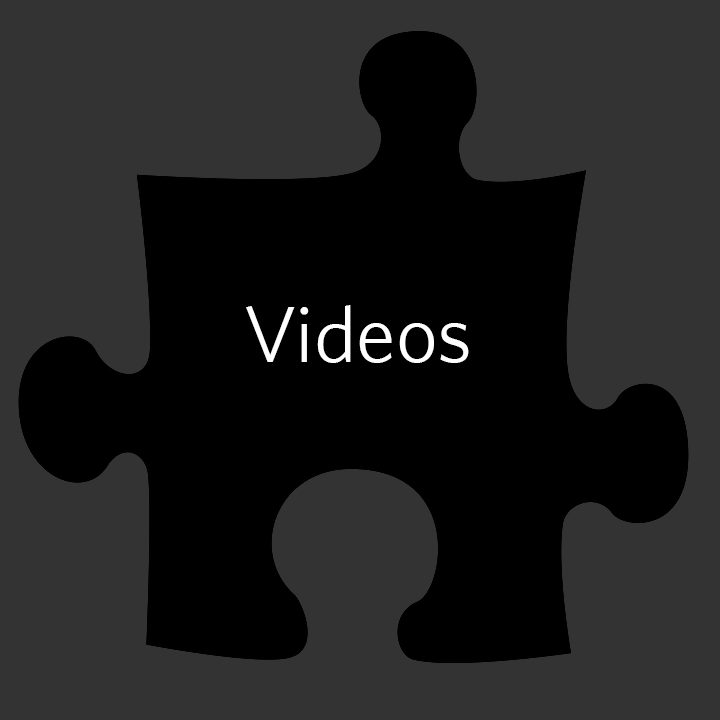
<style>
.page{position:relative;width:720px;height:720px;background:#333333}
.page>*{position:absolute;margin:0}
.t1{font:80px "Whitney-Book";color:#ffffff}
</style>
<div class="page">
<p class="t1" style="left:246px;top:305px;width:223px;height:58px">Videos</p>
</div>
